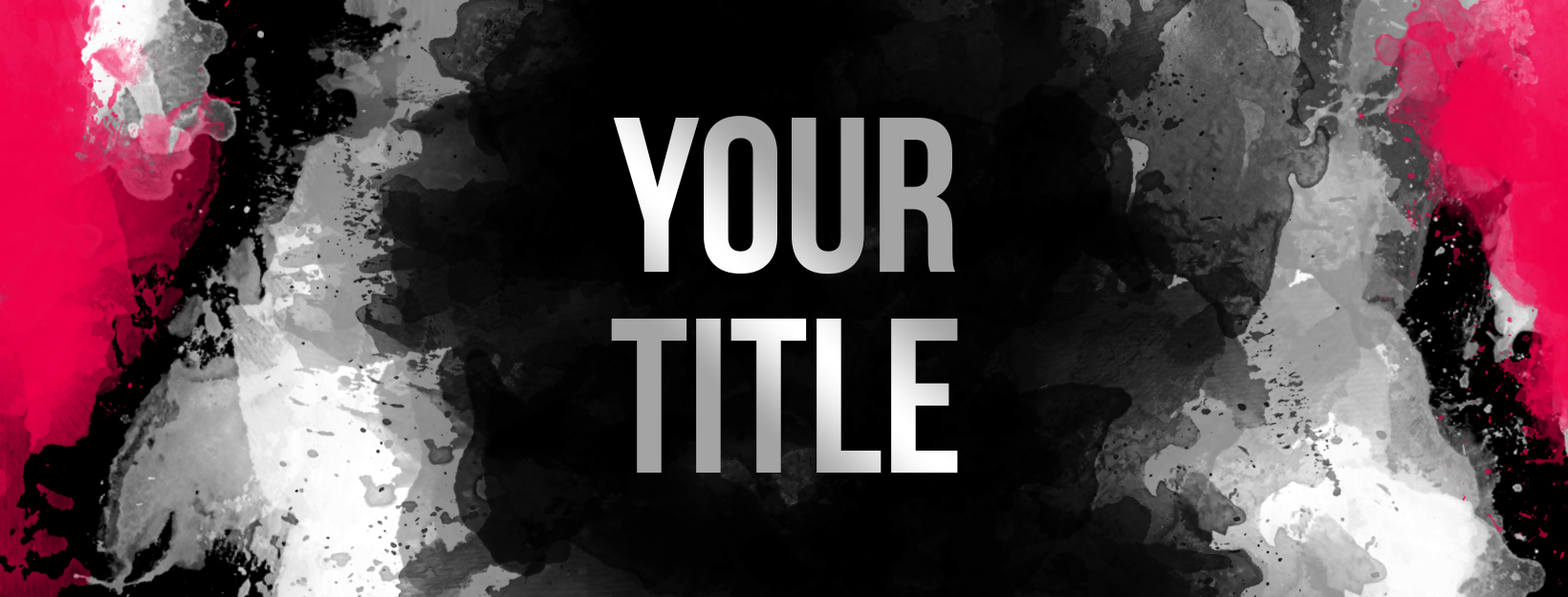
<style>
.page{position:relative;width:1568px;height:597px}
.page>*{position:absolute;margin:0}
.t1{font:219.9px/200.8px "BebasNeueBold";text-transform:uppercase}
</style>
<div class="page">
<p class="t1" style="left:611px;top:116px;width:347px;height:356px;text-align:center">your<br>title</p>
</div>
